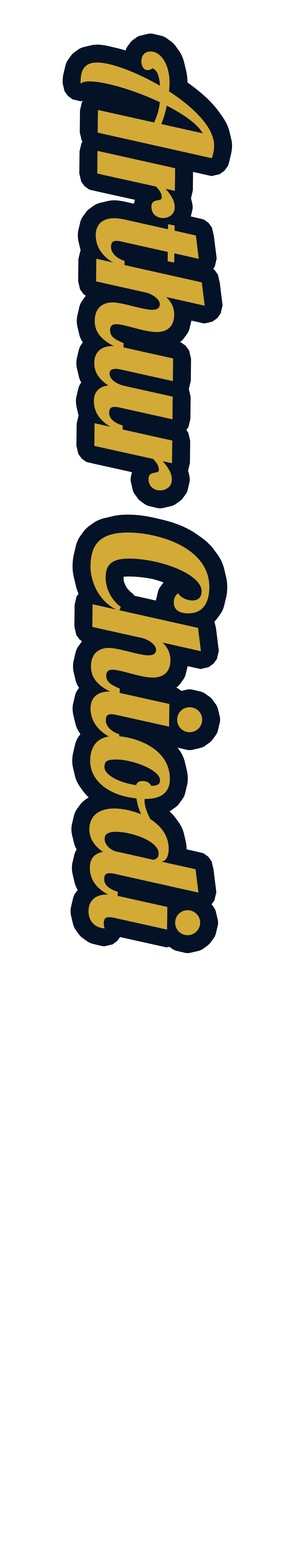
<style>
.page{position:relative;width:285px;height:1568px;background:#ffffff}
.page>*{position:absolute;margin:0}
.t1{font:154.7px "Lobster1.4";color:#d3aa36;font-weight:bold}
</style>
<div class="page">
<p class="t1" style="left:80px;top:51px;width:134px;height:884px;rotate:91deg">Arthur Chiodi</p>
</div>
